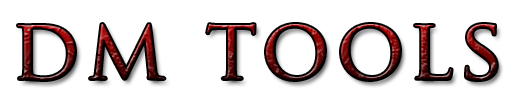
<style>
.page{position:relative;width:510px;height:101px;background:#ffffff}
.page>*{position:absolute;margin:0}
.t1{font:84.9px "TrajanPro-Regular";letter-spacing:0.075em}
</style>
<div class="page">
<p class="t1" style="left:18px;top:24px;width:479px;height:56px">dm tools</p>
</div>
